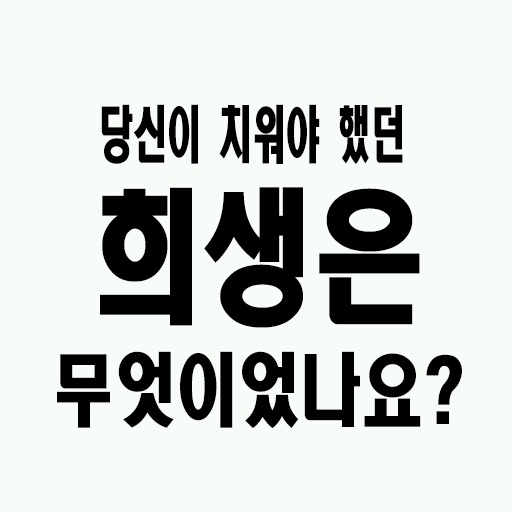
<style>
.page{position:relative;width:512px;height:512px;background:#f8fcf8}
.page>*{position:absolute;margin:0}
.t1{font:61.2px "HeadlineR-HM";color:#000000;scale:0.56 1}
.t2{font:144px "HeadlineR-HM";color:#000000;scale:0.78 1}
.t3{font:79.2px "HeadlineR-HM";color:#000000;scale:0.78 1}
</style>
<div class="page">
<p class="t1" style="left:101px;top:104px;width:302px;height:60px">당신이 치워야 했던</p>
<p class="t2" style="left:100px;top:187px;width:320px;height:141px">희생은</p>
<p class="t3" style="left:57px;top:351px;width:405px;height:77px">무엇이었나요?</p>
</div>
